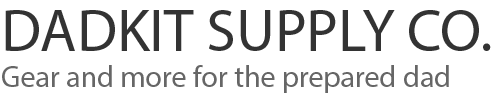
<style>
.page{position:relative;width:495px;height:99px;background:#ffffff}
.page>*{position:absolute;margin:0}
.t1{font:30px "MyriadPro-Regular";color:#666666}
.t2{font:60px "MyriadPro-Regular";color:#333333}
</style>
<div class="page">
<p class="t1" style="left:2px;top:10px;width:489px;height:83px"><span class="t2">DADKIT SUPPLY CO.<br></span>Gear and more for the prepared dad</p>
</div>
